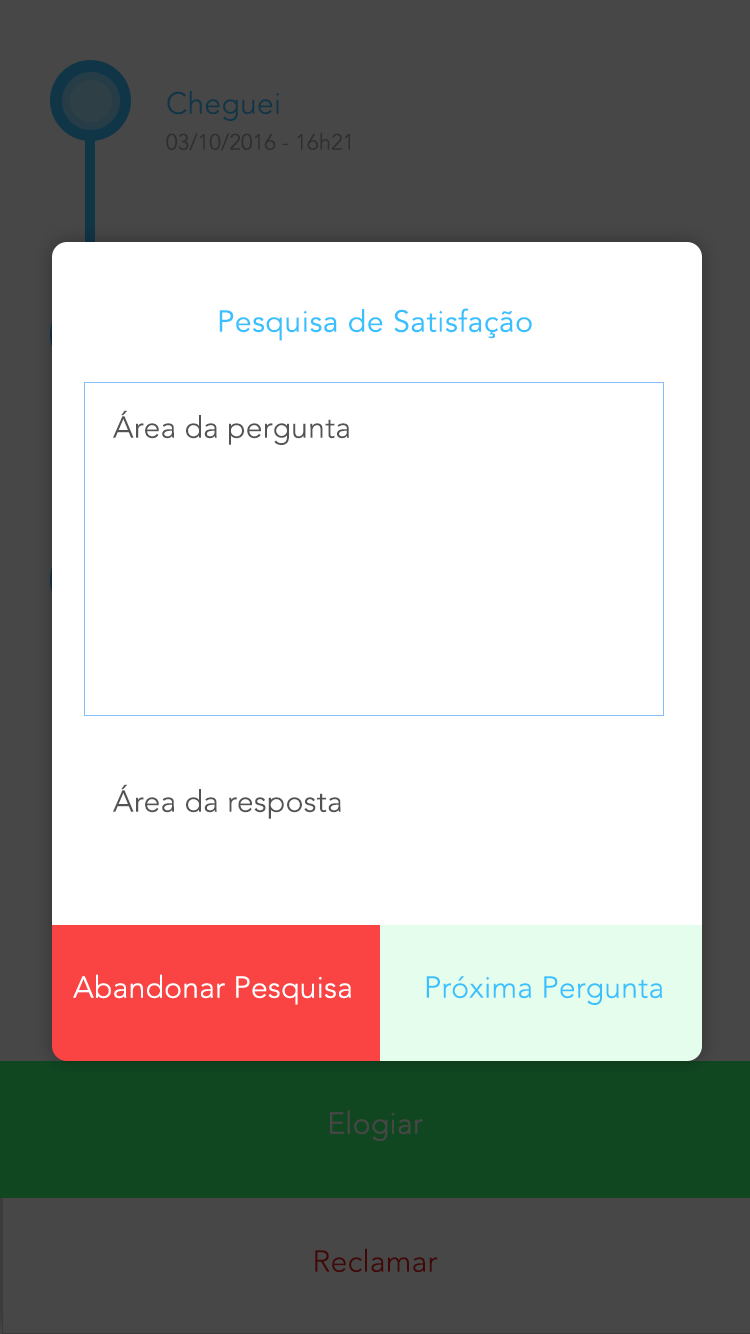
<style>
.page{position:relative;width:750px;height:1334px;background:#ffffff}
.page>*{position:absolute;margin:0}
.t1{font:30px "AvenirLTStd-Light";letter-spacing:0.01em;color:#103547}
.t2{font:22px "AvenirLTStd-Light";letter-spacing:0.01em;color:#2d2e2e}
.t3{font:30px "AvenirLTStd-Book";letter-spacing:0.02em;color:#39c0ff}
.t4{font:30px "AvenirLTStd-Light";letter-spacing:0.01em;color:#535354}
.t5{font:30px "AvenirLTStd-Light";letter-spacing:0.01em;color:#ffffff}
.t6{font:30px "AvenirLTStd-Light";letter-spacing:0.01em;color:#39c0ff}
.t7{font:30px "AvenirLTStd-Light";letter-spacing:0.01em;color:#474747}
.t8{font:30px "AvenirLTStd-Light";letter-spacing:0.01em;color:#410707}
</style>
<div class="page">
<p class="t1" style="left:167px;top:90px;width:112px;height:31px">Cheguei</p>
<p class="t2" style="left:166px;top:132px;width:184px;height:19px">03/10/2016 - 16h21</p>
<p class="t3" style="left:219px;top:308px;width:313px;height:33px">Pesquisa de Satisfação</p>
<p class="t4" style="left:113px;top:410px;width:236px;height:35px">Área da pergunta</p>
<p class="t4" style="left:113px;top:784px;width:228px;height:35px">Área da resposta</p>
<p class="t5" style="left:73px;top:974px;width:278px;height:31px">Abandonar Pesquisa</p>
<p class="t6" style="left:426px;top:976px;width:236px;height:29px">Próxima Pergunta</p>
<p class="t7" style="left:330px;top:1110px;width:93px;height:31px">Elogiar</p>
<p class="t8" style="left:315px;top:1248px;width:123px;height:25px">Reclamar</p>
</div>
